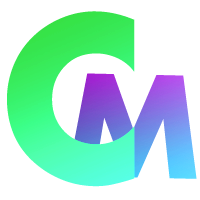
<style>
.page{position:relative;width:200px;height:200px;background:#ffffff}
.page>*{position:absolute;margin:0}
.t1{font:220.1px "Futura-Bold"}
.t2{font:136.3px "Futura-Bold"}
</style>
<div class="page">
<p class="t1" style="left:7px;top:11px;width:128px;height:176px">C</p>
<p class="t2" style="left:67px;top:73px;width:130px;height:106px;rotate:1deg">M</p>
</div>
